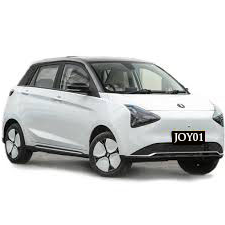
<style>
.page{position:relative;width:225px;height:225px;background:#ffffff}
.page>*{position:absolute;margin:0}
.t1{font:9.4px "TrajanPro-Bold";color:#fcfbfa}
</style>
<div class="page">
<p class="t1" style="left:174px;top:133px;width:29px;height:10px">JOY01</p>
</div>
